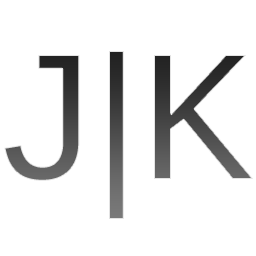
<style>
.page{position:relative;width:256px;height:256px;background:#ffffff}
.page>*{position:absolute;margin:0}
.t1{font:180px "EndurancePro";letter-spacing:-0.01em;color:#ffffff}
</style>
<div class="page">
<p class="t1" style="left:4px;top:51px;width:249px;height:168px">J|K</p>
</div>
